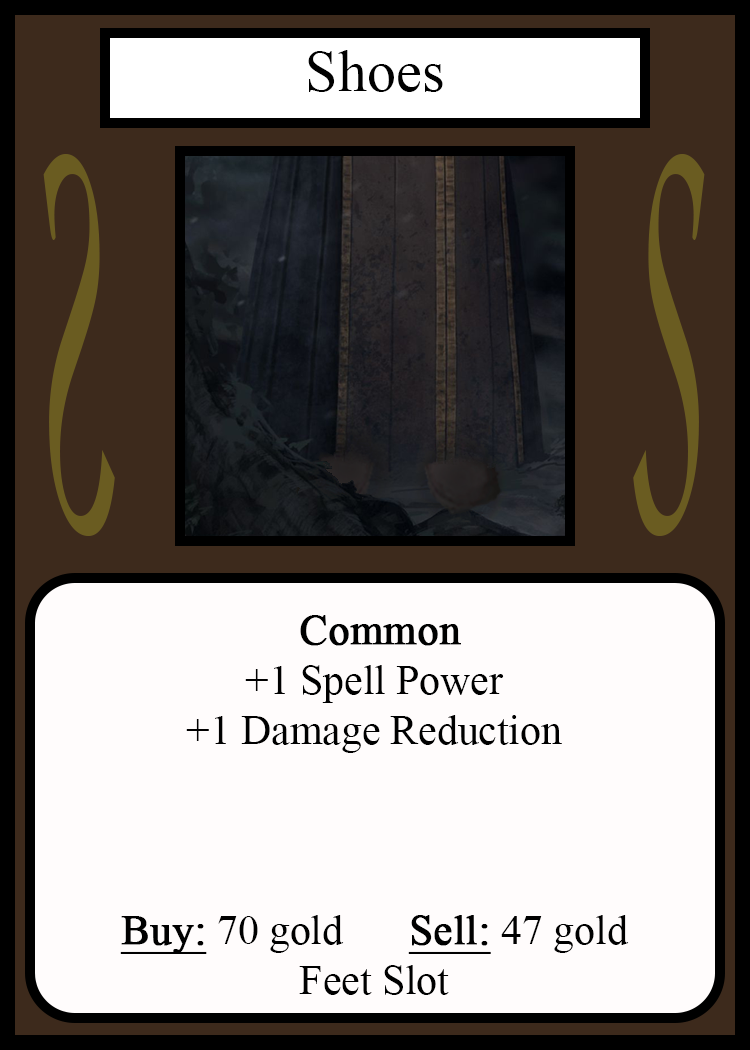
<style>
.page{position:relative;width:750px;height:1050px;background:#fffcfc}
.page>*{position:absolute;margin:0}
.t1{font:58.3px "TimesNewRomanPSMT";color:#010101}
.t2{font:548.5px "Apple-Chancery";color:#6a5c21;scale:0.27 1}
.t3{font:548.2px "Apple-Chancery";color:#6a5c21;scale:0.27 1}
.t4{font:41.7px "TimesNewRomanPSMT";color:#000000}
.t5{font:41.7px "TimesNewRomanPSMT";color:#000000;font-weight:bold}
.t6{font:41.7px "TimesNewRomanPSMT";color:#000000;font-weight:bold;text-decoration:underline}
</style>
<div class="page">
<p class="t1" style="left:308px;top:50px;width:135px;height:42px">Shoes</p>
<p class="t2" style="left:43px;top:154px;width:72px;height:382px;rotate:180deg">S</p>
<p class="t3" style="left:633px;top:154px;width:72px;height:382px">S</p>
<p class="t4" style="left:120px;top:615px;width:509px;height:380px;text-align:center"><span class="t5"> Common<br></span>+1 Spell Power<br>+1 Damage Reduction<br><br><br><br><span class="t6">Buy:</span> 70 gold   <span class="t6">Sell:</span> 47 gold<br>Feet Slot</p>
</div>
